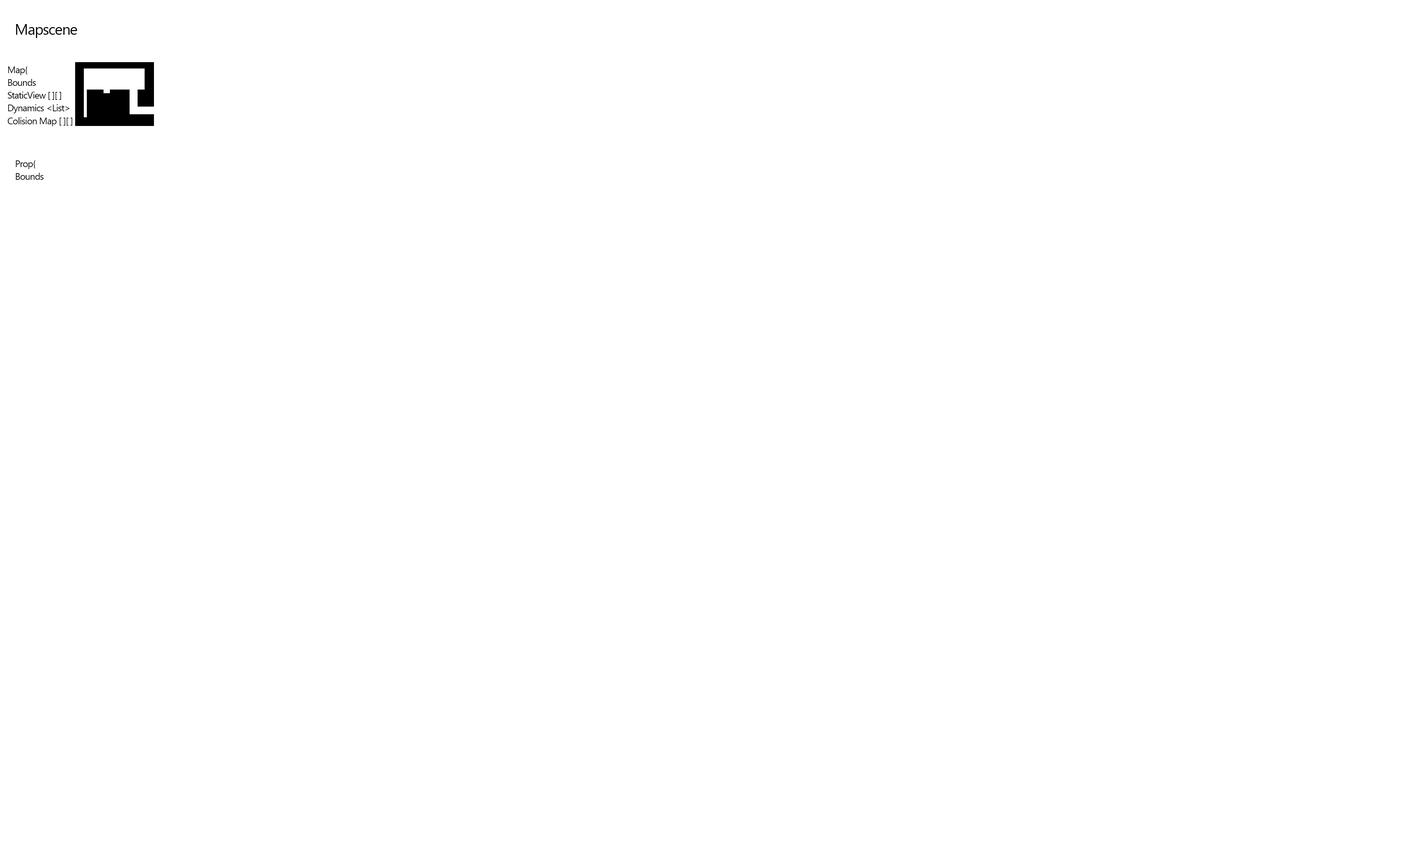
<style>
.page{position:relative;width:1416px;height:842px;background:#ffffff}
.page>*{position:absolute;margin:0}
.t1{font:15px "SegoeUI";letter-spacing:-0.043em;color:#000000}
.t2{font:9.4px/12.7px "SegoeUI";letter-spacing:-0.043em;color:#000000}
</style>
<div class="page">
<p class="t1" style="left:16px;top:24px;width:61px;height:14px">Mapscene</p>
<p class="t2" style="left:8px;top:66px;width:64px;height:60px">Map{<br>Bounds<br>StaticView [ ][ ]<br>Dynamics &lt;List&gt;<br>Colision Map [ ][ ]</p>
<p class="t2" style="left:16px;top:160px;width:28px;height:20px">Prop{<br>Bounds</p>
</div>
